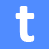
<style>
.page{position:relative;width:49px;height:49px;background:#508cff}
.page>*{position:absolute;margin:0}
.t1{font:60px "Calibri-Bold";color:#ffffff}
</style>
<div class="page">
<p class="t1" style="left:15px;top:6px;width:20px;height:36px">t</p>
</div>
